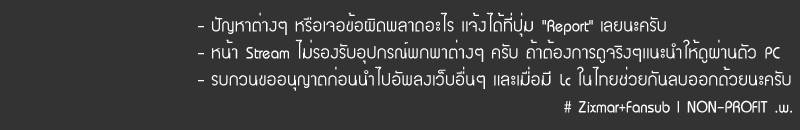
<style>
.page{position:relative;width:800px;height:130px;background:#333333}
.page>*{position:absolute;margin:0}
.t1{font:22.5px "JSThanaporn-Normal";color:#fefefe;scale:1.05 1}
</style>
<div class="page">
<p class="t1" style="left:198px;top:12px;width:594px;height:101px">- ปัญหาต่างๆ หรือเจอข้อผิดพลาดอะไร เเจ้งได้ที่ปุ่ม "Report" เลยนะครับ  <br>- หน้า Stream ไม่รองรับอุปกรณ์พกพาต่างๆ ครับ ถ้าต้องการดูจริงๆเเนะนำให้ดูผ่านตัว PC <br>- รบกวนขออนุญาตก่อนนำไปอัพลงเว็บอื่นๆ เเละเมื่อมี Lc ในไทยช่วยกันลบออกด้วยนะครับ<br>                                                     # Zixmar+Fansub | NON-PROFIT .w.</p>
</div>
